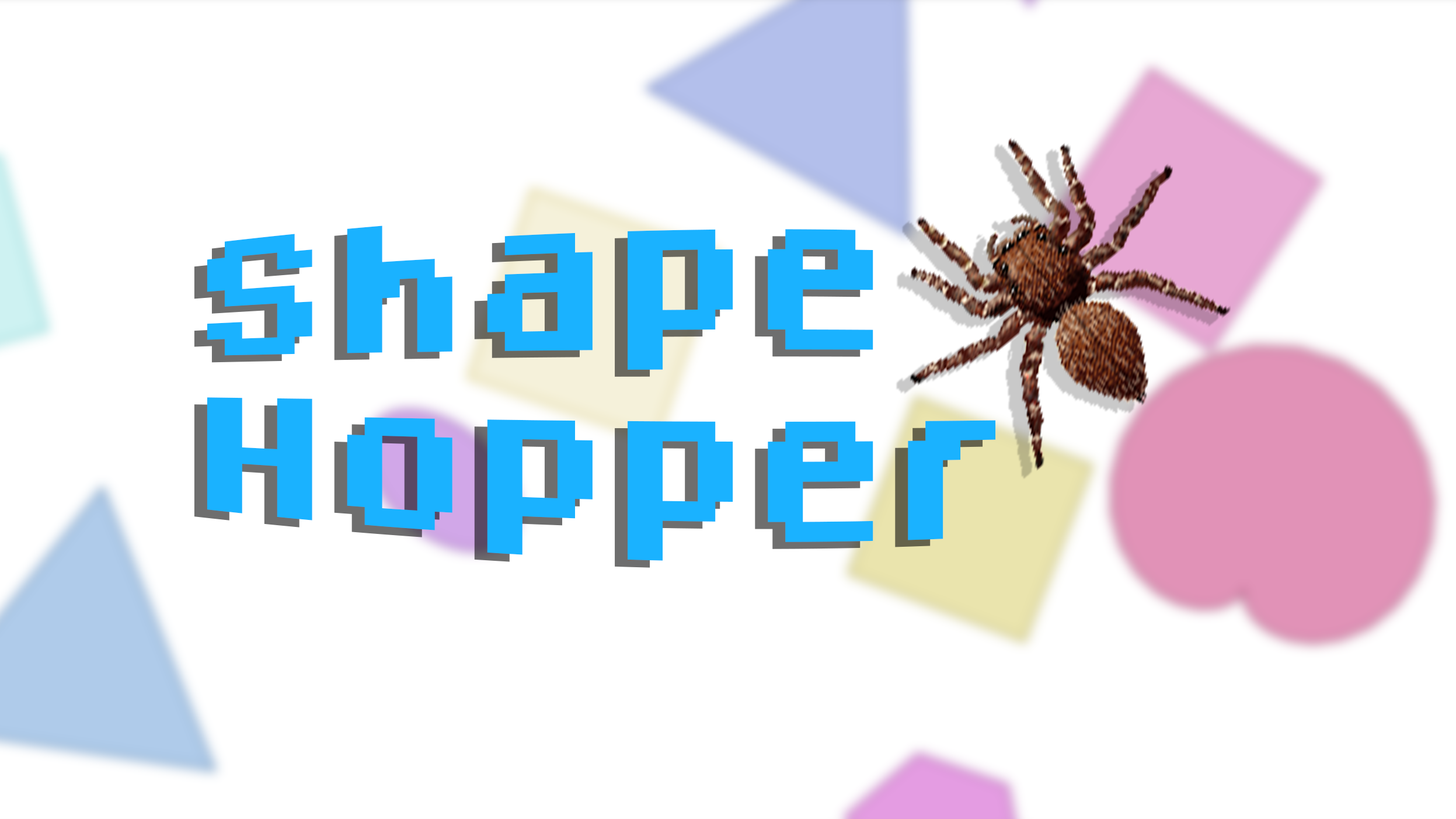
<style>
.page{position:relative;width:1456px;height:819px;background:#ffffff}
.page>*{position:absolute;margin:0}
.t1{font:140.2px "Dogica_Pixel_Bold";color:#1ab2ff}
</style>
<div class="page">
<p class="t1" style="left:207px;top:225px;width:789px;height:336px">Shape<br>Hopper</p>
</div>
